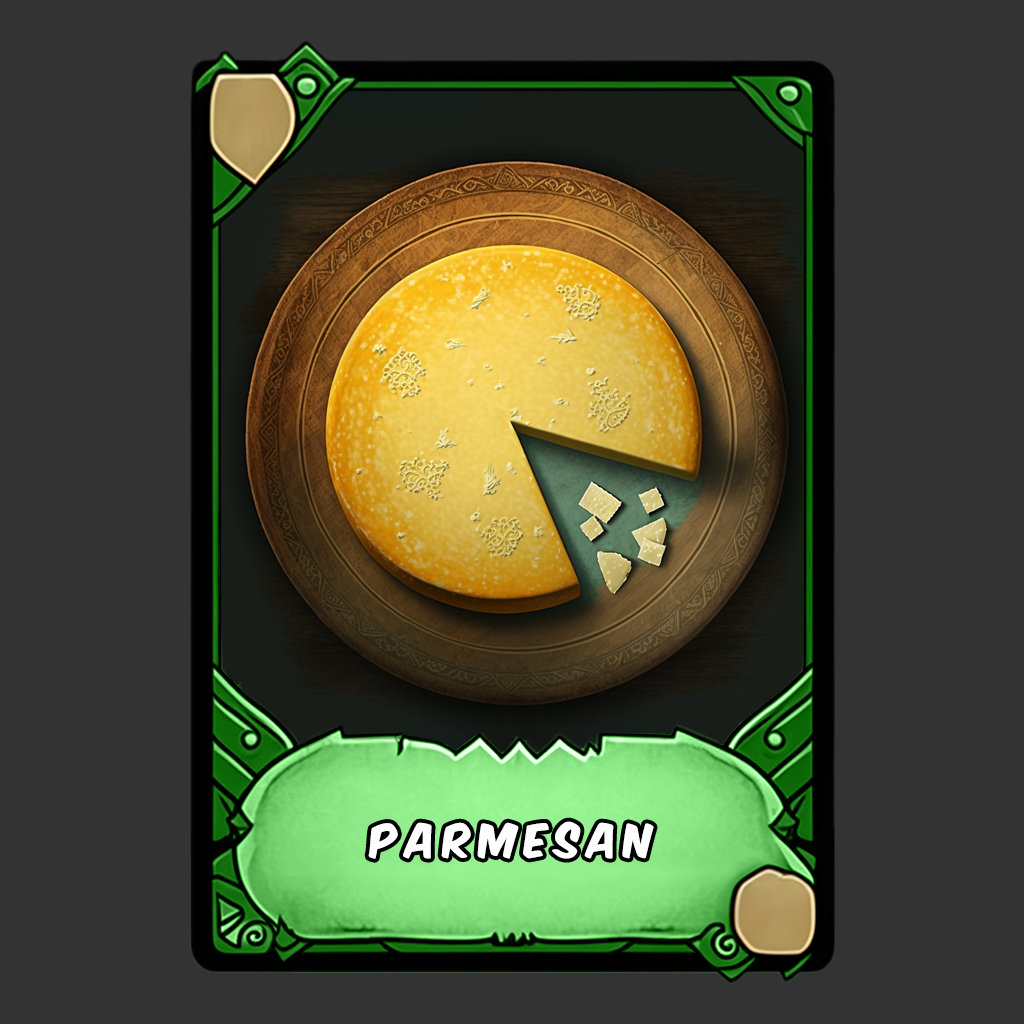
<style>
.page{position:relative;width:1024px;height:1024px;background:#333333}
.page>*{position:absolute;margin:0}
.t1{font:40px "KomikaAxis";letter-spacing:0.2em;color:#ffffff}
</style>
<div class="page">
<p class="t1" style="left:368px;top:821px;width:286px;height:38px">parmesan</p>
</div>
